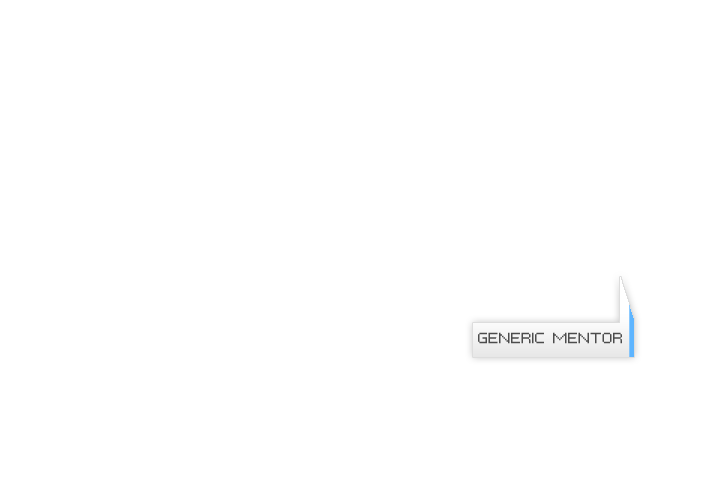
<style>
.page{position:relative;width:720px;height:480px;background:#ffffff}
.page>*{position:absolute;margin:0}
.t1{font:12px "PFTempestaSevenExtended";color:#4c4c4c}
</style>
<div class="page">
<p class="t1" style="left:478px;top:332px;width:144px;height:12px">GENERIC MENTOR</p>
</div>
